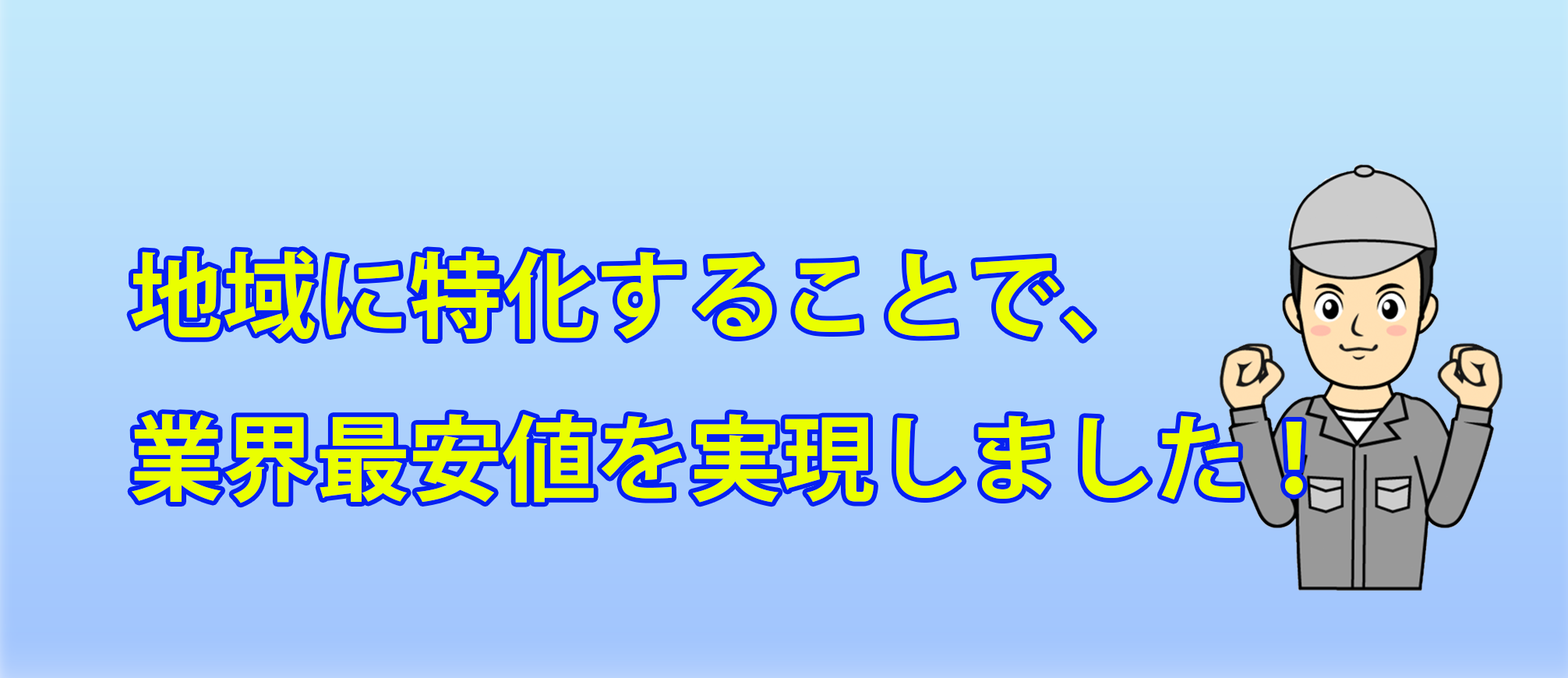
<style>
.page{position:relative;width:1568px;height:678px}
.page>*{position:absolute;margin:0}
.t1{font:93.2px "KozGoPr6N-Bold";color:#eaff00}
</style>
<div class="page">
<p class="t1" style="left:131px;top:250px;width:1172px;height:253px">地域に特化することで、<br>業界最安値を実現しました！</p>
</div>
